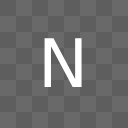
<style>
.page{position:relative;width:128px;height:128px;background:#696969}
.page>*{position:absolute;margin:0}
.t1{font:67px "DejaVuSans";color:#ffffff}
</style>
<div class="page">
<p class="t1" style="left:44px;top:38px;width:38px;height:49px">N</p>
</div>
